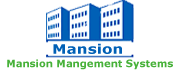
<style>
.page{position:relative;width:178px;height:70px;background:#ffffff}
.page>*{position:absolute;margin:0}
.t1{font:12.9px "Verdana-Bold";color:#0060b6;scale:1.19 1}
.t2{font:10.3px "Verdana-Bold";color:#47b139}
</style>
<div class="page">
<p class="t1" style="left:53px;top:43px;width:69px;height:11px">Mansion</p>
<p class="t2" style="left:7px;top:59px;width:166px;height:11px">Mansion Mangement Systems</p>
</div>
